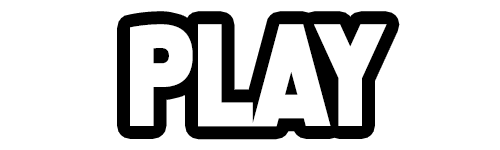
<style>
.page{position:relative;width:500px;height:150px;background:#ffffff}
.page>*{position:absolute;margin:0}
.t1{font:160px "SheSmiles";color:#ffffff}
</style>
<div class="page">
<p class="t1" style="left:130px;top:24px;width:257px;height:103px">play</p>
</div>
